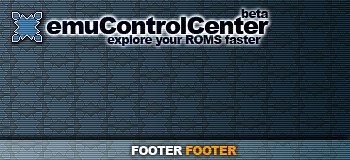
<style>
.page{position:relative;width:350px;height:160px}
.page>*{position:absolute;margin:0}
.t1{font:24px "Arial-Black";letter-spacing:-0.05em;color:#000006}
.t2{font:12px "Arial-Black";letter-spacing:-0.05em;color:#00000f}
.t3{font:12px "Arial-Black";letter-spacing:-0.05em;color:#000013}
.t4{font:12px "Arial-Black";letter-spacing:-0.05em;color:#ffffff}
.t5{font:12px "Arial-Black";letter-spacing:-0.05em;color:#f99800}
</style>
<div class="page">
<p class="t1" style="left:46px;top:17px;width:223px;height:17px">emuControlCenter</p>
<p class="t2" style="left:241px;top:9px;width:27px;height:9px">beta</p>
<p class="t3" style="left:107px;top:35px;width:154px;height:11px">explore your ROMS faster</p>
<p class="t4" style="left:131px;top:146px;width:106px;height:9px">FOOTER <span class="t5">FOOTER</span></p>
</div>
